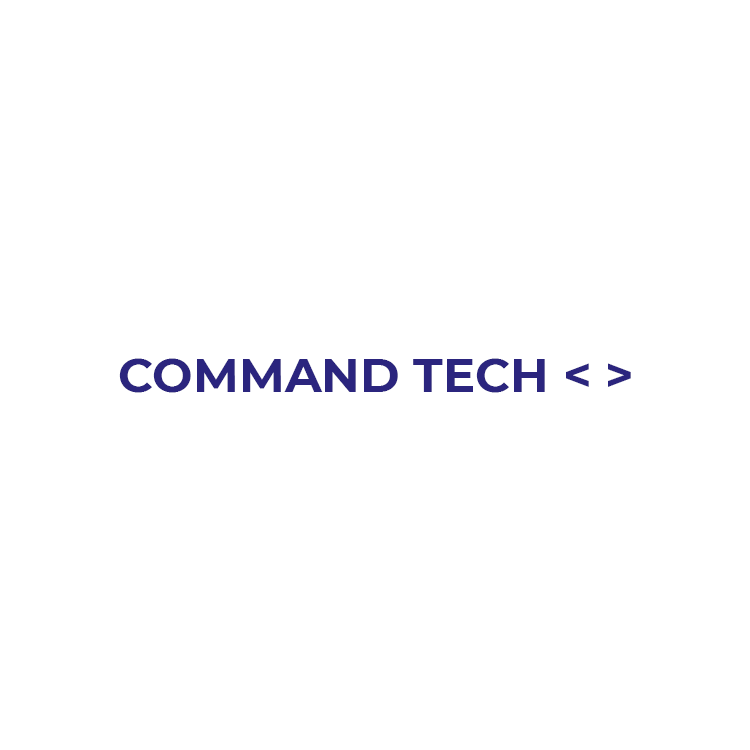
<style>
.page{position:relative;width:750px;height:750px;background:#ffffff}
.page>*{position:absolute;margin:0}
.t1{font:48px "Montserrat-Bold";color:#2b257e}
</style>
<div class="page">
<p class="t1" style="left:119px;top:358px;width:512px;height:35px">COMMAND TECH &lt; &gt;</p>
</div>
